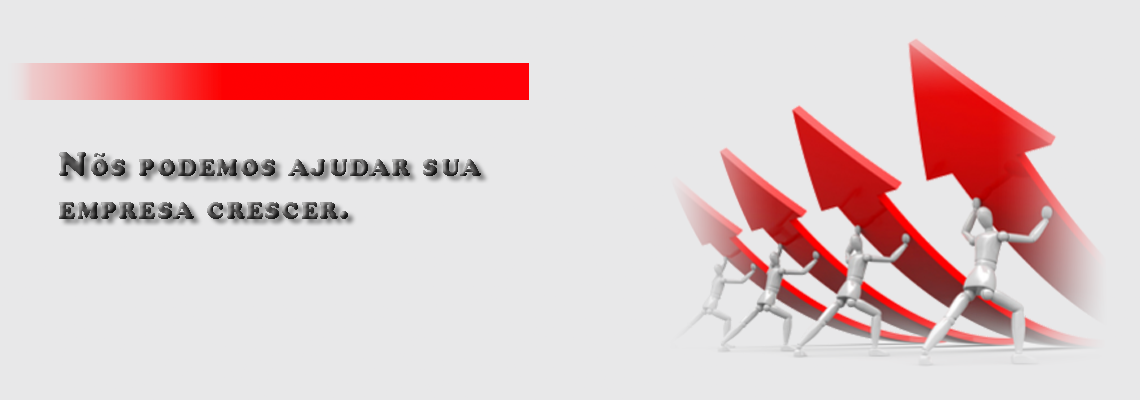
<style>
.page{position:relative;width:1140px;height:400px;background:#e8e8e9}
.page>*{position:absolute;margin:0}
.t1{font:36px "CooperBlack";letter-spacing:0.05em;font-variant:small-caps}
</style>
<div class="page">
<p class="t1" style="left:59px;top:152px;width:422px;height:67px">Nõs podemos ajudar sua <br>empresa crescer.</p>
</div>
